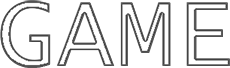
<style>
.page{position:relative;width:230px;height:68px;background:#ffffff}
.page>*{position:absolute;margin:0}
.t1{font:100.5px "LucidaConsole";letter-spacing:0.02em;scale:0.96 1}
</style>
<div class="page">
<p class="t1" style="left:0px;top:1px;width:230px;height:67px">GAME</p>
</div>
